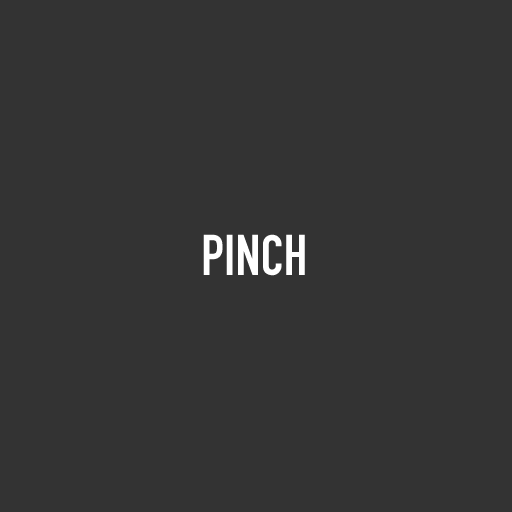
<style>
.page{position:relative;width:512px;height:512px;background:#333333}
.page>*{position:absolute;margin:0}
.t1{font:56.4px "DINEngschrift";color:#ffffff}
</style>
<div class="page">
<p class="t1" style="left:203px;top:234px;width:102px;height:42px">PINCH</p>
</div>
